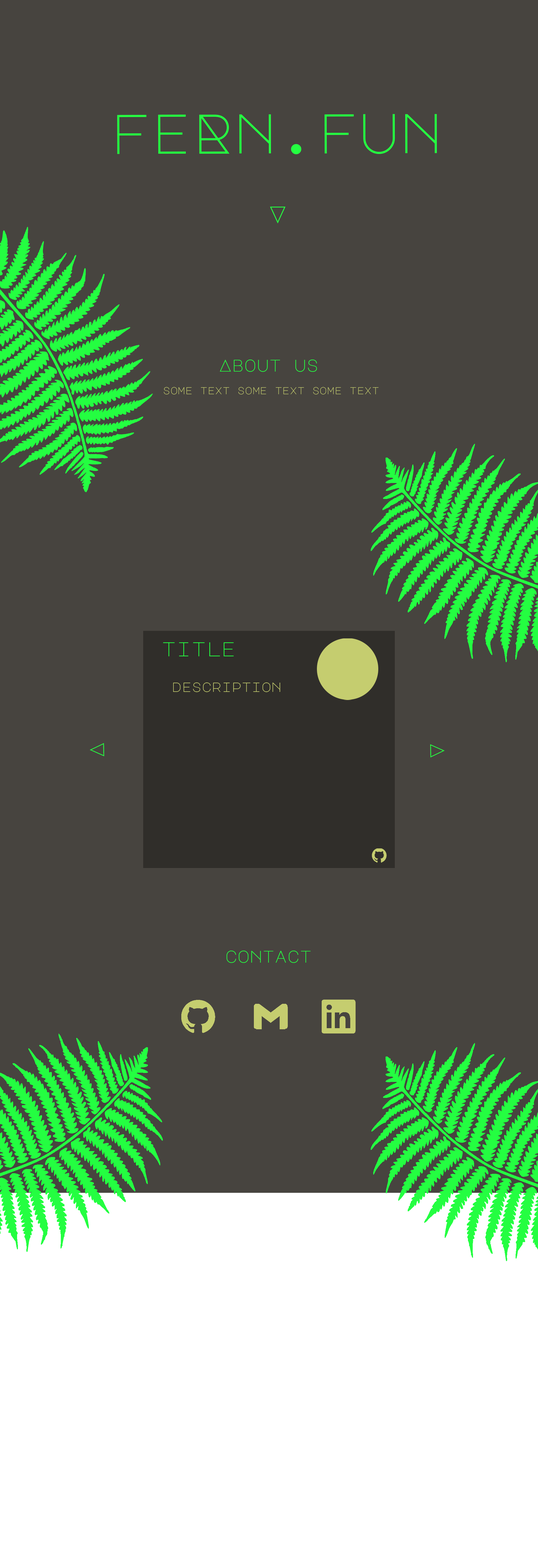
<style>
.page{position:relative;width:538px;height:1568px;background:#47443f}
.page>*{position:absolute;margin:0}
.t1{font:23.5px "MajorMonoDisplay-Regular";color:#24fe41}
.t2{font:16.8px "MajorMonoDisplay-Regular";color:#24fe41}
.t3{font:10.1px "MajorMonoDisplay-Regular";color:#c5cd6f}
.t4{font:20.2px "MajorMonoDisplay-Regular";color:#24fe41}
.t5{font:13.4px "MajorMonoDisplay-Regular";color:#c5cd6f}
</style>
<div class="page">
<p class="t1" style="left:270px;top:207px;width:15px;height:16px;rotate:180deg">A</p>
<p class="t2" style="left:220px;top:360px;width:97px;height:12px">About us</p>
<p class="t3" style="left:164px;top:387px;width:214px;height:8px">some text some text some text</p>
<p class="t4" style="left:163px;top:642px;width:71px;height:14px">title</p>
<p class="t5" style="left:173px;top:682px;width:107px;height:10px">description</p>
<p class="t4" style="left:90px;top:743px;width:14px;height:13px;rotate:-91deg">A</p>
<p class="t4" style="left:430px;top:744px;width:14px;height:14px;rotate:89deg">A</p>
<p class="t2" style="left:226px;top:951px;width:85px;height:12px">contact</p>
</div>
